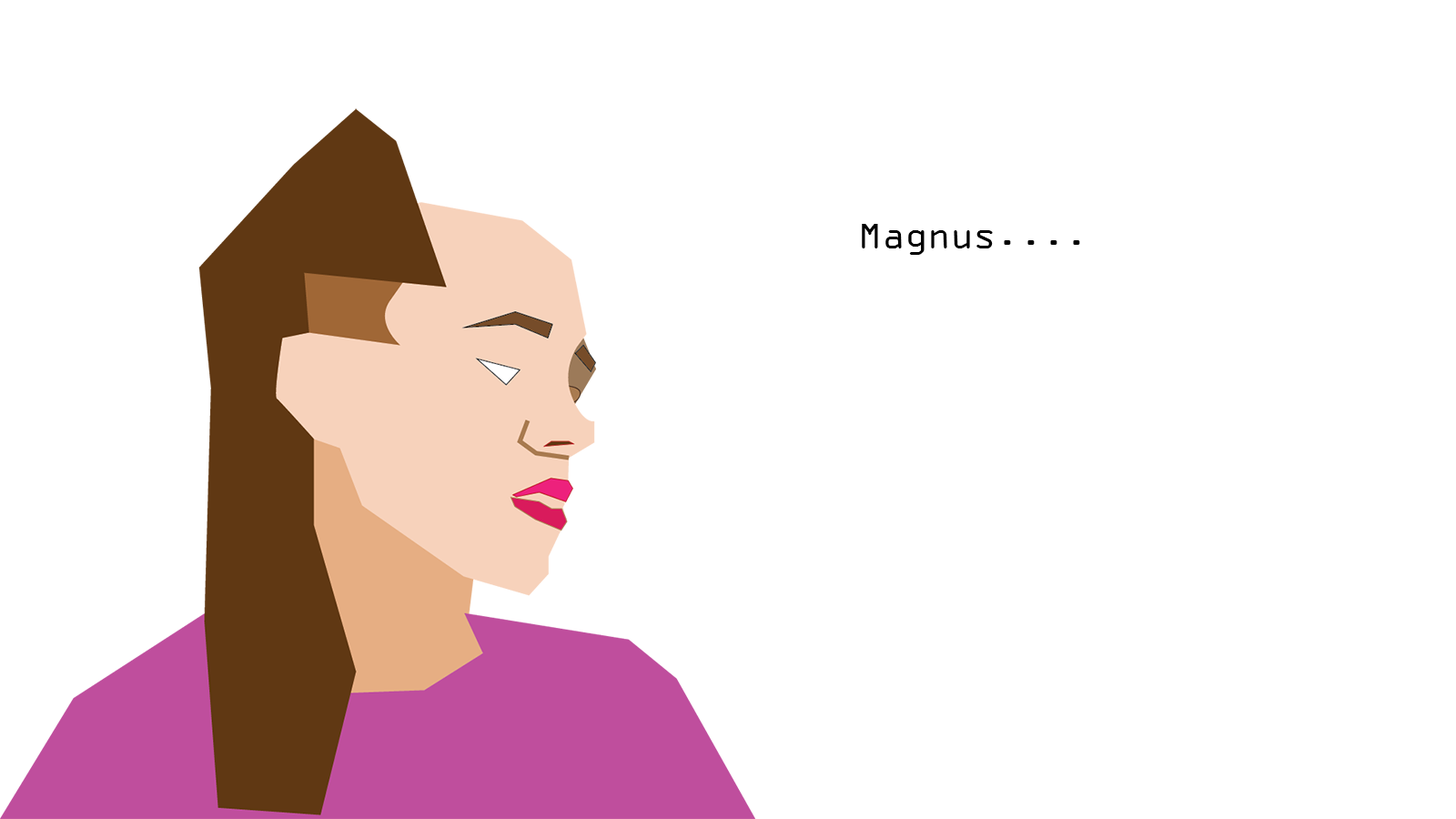
<style>
.page{position:relative;width:1456px;height:819px;background:#ffffff}
.page>*{position:absolute;margin:0}
.t1{font:37.9px "OCRAExtended";color:#000000}
</style>
<div class="page">
<p class="t1" style="left:862px;top:224px;width:218px;height:31px">Magnus....</p>
</div>
